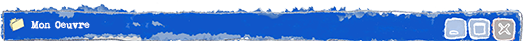
<style>
.page{position:relative;width:525px;height:41px;background:#ffffff}
.page>*{position:absolute;margin:0}
.t1{font:10px "MyUnderwood";color:#ffffff}
</style>
<div class="page">
<p class="t1" style="left:31px;top:20px;width:59px;height:9px">Mon Oeuvre</p>
</div>
